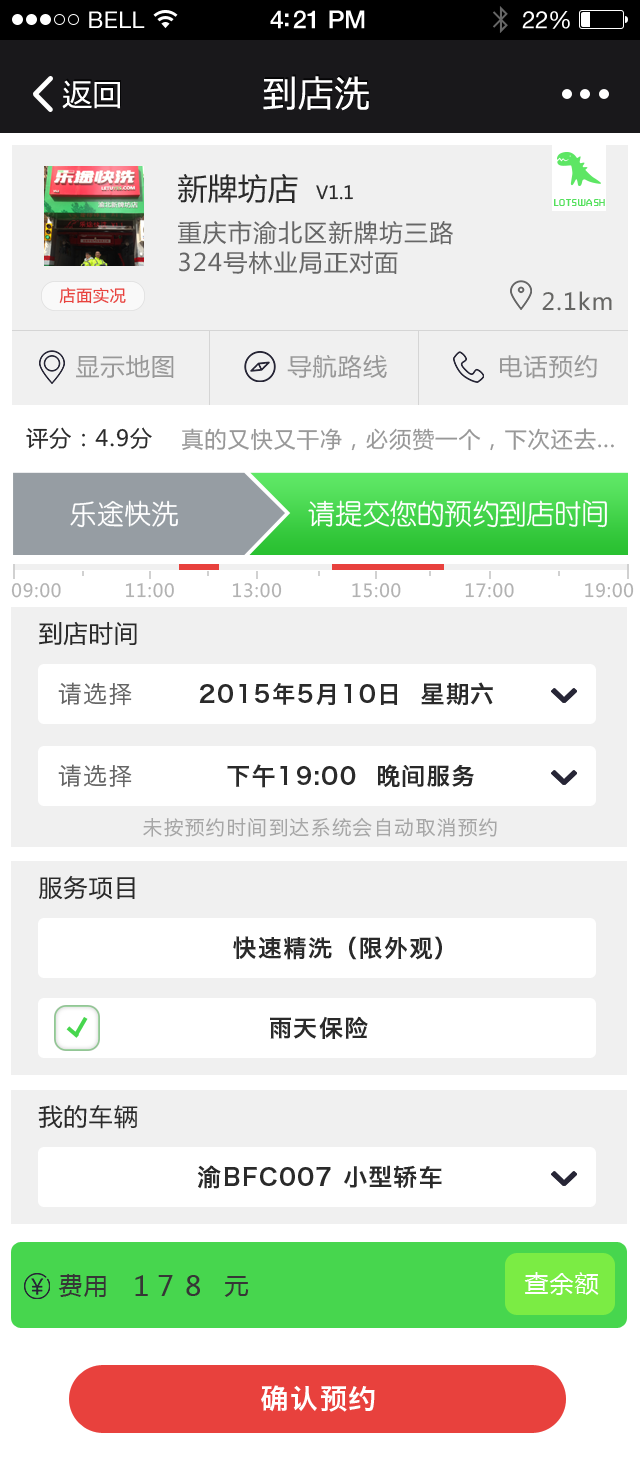
<style>
.page{position:relative;width:640px;height:1474px;background:#f0f0f0}
.page>*{position:absolute;margin:0}
.t1{font:23px "HelveticaNeue";letter-spacing:0.02em;color:#ffffff}
.t2{font:25px "HelveticaNeue-Medium";letter-spacing:-0.02em;color:#ffffff}
.t3{font:24px "HelveticaNeue";letter-spacing:-0.02em;color:#ffffff}
.t4{font:36px "MingLan_UI";letter-spacing:0.005em;color:#ffffff}
.t5{font:30px "MingLan_UI";letter-spacing:0.005em;color:#ffffff}
.t6{font:30px "MicrosoftYaHei";letter-spacing:0.005em;color:#2a2a2a}
.t7{font:18px "MicrosoftYaHei";letter-spacing:0.005em;color:#2a2a2a}
.t8{font:10px "MFShangHei_Noncommercial-Regular";letter-spacing:0.1em;color:#54e05c}
.t9{font:24px/29.5px "MicrosoftYaHei";letter-spacing:0.05em;color:#666666}
.t10{font:16px "MicrosoftYaHei";letter-spacing:0.05em;color:#e8413d}
.t11{font:23.2px "MicrosoftYaHei";letter-spacing:0.05em;color:#666664}
.t12{font:24px "MicrosoftYaHei";letter-spacing:0.05em;color:#989898}
.t13{font:22px "MicrosoftYaHei";letter-spacing:0.05em;color:#2a2a2a}
.t14{font:22px "MicrosoftYaHei";letter-spacing:0.05em;color:#989898}
.t15{font:27.4px "ç»å¸åä½ç®-regular";color:#ffffff}
.t16{font:18px "MicrosoftYaHei";letter-spacing:0.05em;color:#b2b2b2}
.t17{font:24px "MicrosoftYaHei";letter-spacing:0.05em;color:#2a2a2a}
.t18{font:24px "HiraginoSansGB-W3";letter-spacing:0.05em;color:#666666}
.t19{font:24px "HiraginoSansGB-W6";letter-spacing:0.05em;color:#2a2a2a}
.t20{font:20px "HiraginoSansGB-W3";letter-spacing:0.05em;color:#a5a5a5}
.t21{font:24px "MicrosoftYaHei";letter-spacing:0.05em;color:#363636}
.t22{font:28px "MicrosoftYaHei";letter-spacing:0.05em;color:#363636}
.t23{font:24px "MicrosoftYaHei";letter-spacing:0.05em;color:#ffffff}
.t24{font:28px "HiraginoSansGB-W6";letter-spacing:0.05em;color:#ffffff}
</style>
<div class="page">
<p class="t1" style="left:89px;top:11px;width:56px;height:17px">BELL</p>
<p class="t2" style="left:270px;top:10px;width:95px;height:19px">4:21 PM</p>
<p class="t3" style="left:522px;top:11px;width:48px;height:18px">22%</p>
<p class="t4" style="left:263px;top:76px;width:106px;height:35px">到店洗</p>
<p class="t5" style="left:62px;top:80px;width:58px;height:29px">返回</p>
<p class="t6" style="left:178px;top:173px;width:175px;height:30px">新牌坊店  <span class="t7">V1.1</span></p>
<p class="t8" style="left:554px;top:199px;width:51px;height:7px">LOTSWASH</p>
<p class="t9" style="left:178px;top:220px;width:275px;height:54px">重庆市渝北区新牌坊三路<br>324号林业局正对面</p>
<p class="t10" style="left:59px;top:287px;width:67px;height:17px">店面实况</p>
<p class="t11" style="left:542px;top:291px;width:70px;height:20px">2.1km</p>
<p class="t12" style="left:76px;top:355px;width:98px;height:23px">显示地图</p>
<p class="t12" style="left:287px;top:355px;width:100px;height:24px">导航路线</p>
<p class="t12" style="left:500px;top:355px;width:97px;height:24px">电话预约</p>
<p class="t13" style="left:26px;top:427px;width:126px;height:22px">评分：4.9分</p>
<p class="t14" style="left:182px;top:428px;width:432px;height:23px">真的又快又干净，必须赞一个，下次还去...</p>
<p class="t15" style="left:70px;top:500px;width:108px;height:28px">乐途快洗</p>
<p class="t15" style="left:308px;top:500px;width:299px;height:28px">请提交您的预约到店时间</p>
<p class="t16" style="left:11px;top:583px;width:623px;height:15px">09:00          11:00         13:00           15:00          17:00           19:00</p>
<p class="t17" style="left:39px;top:621px;width:98px;height:25px">到店时间</p>
<p class="t18" style="left:58px;top:682px;width:74px;height:24px">请选择</p>
<p class="t19" style="left:199px;top:682px;width:294px;height:24px">2015年5月10日  星期六</p>
<p class="t18" style="left:58px;top:764px;width:74px;height:24px">请选择</p>
<p class="t19" style="left:227px;top:764px;width:247px;height:24px">下午19:00  晚间服务</p>
<p class="t20" style="left:143px;top:817px;width:354px;height:20px">未按预约时间到达系统会自动取消预约</p>
<p class="t17" style="left:39px;top:875px;width:96px;height:25px">服务项目</p>
<p class="t19" style="left:233px;top:936px;width:209px;height:24px">快速精洗（限外观）</p>
<p class="t19" style="left:270px;top:1016px;width:98px;height:23px">雨天保险</p>
<p class="t17" style="left:38px;top:1105px;width:100px;height:24px">我的车辆</p>
<p class="t19" style="left:197px;top:1165px;width:245px;height:24px">渝BFC007 小型轿车</p>
<p class="t21" style="left:58px;top:1274px;width:48px;height:23px">费用</p>
<p class="t22" style="left:135px;top:1275px;width:13px;height:21px">1</p>
<p class="t22" style="left:158px;top:1275px;width:42px;height:21px">7 8</p>
<p class="t21" style="left:224px;top:1276px;width:25px;height:21px">元</p>
<p class="t23" style="left:524px;top:1272px;width:75px;height:23px">查余额</p>
<p class="t24" style="left:261px;top:1385px;width:114px;height:27px">确认预约</p>
</div>
